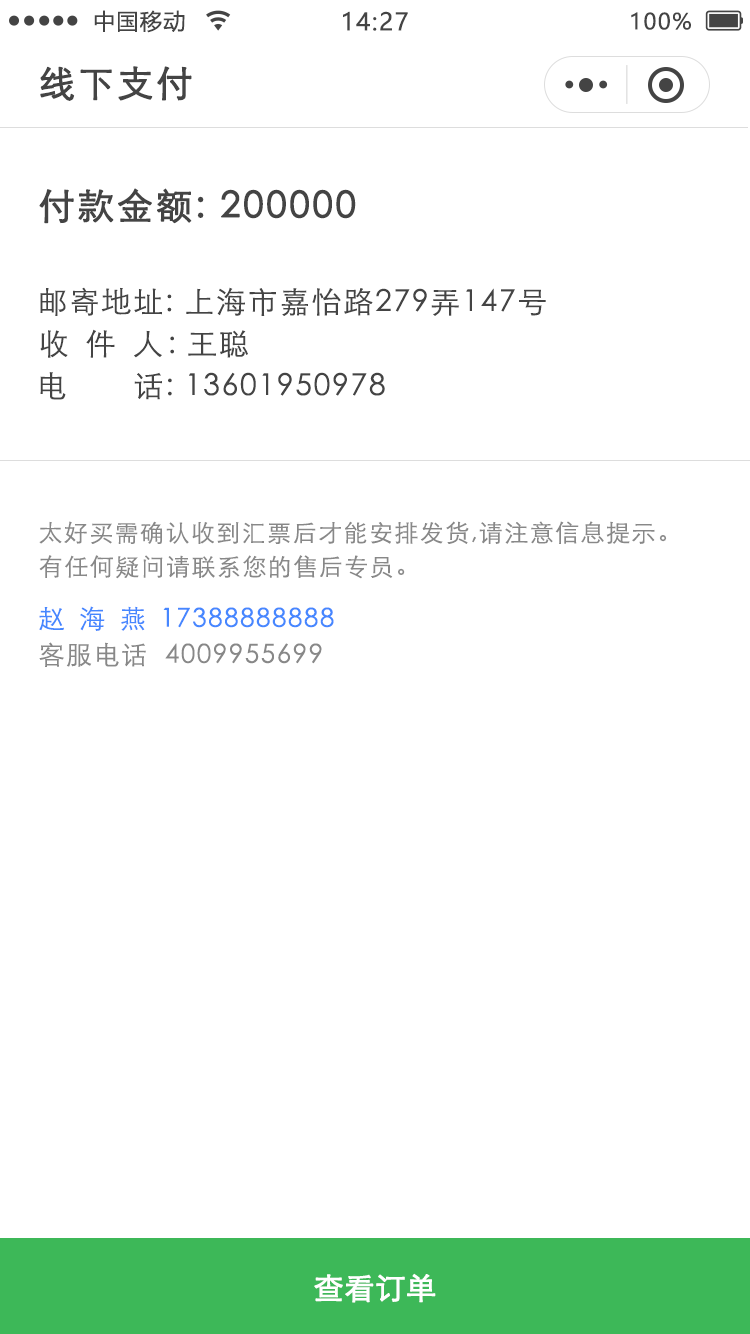
<style>
.page{position:relative;width:750px;height:1334px;background:#ffffff}
.page>*{position:absolute;margin:0}
.t1{font:22px "MicrosoftYaHei";letter-spacing:0.06em;color:#444444}
.t2{font:24px "MicrosoftYaHei";letter-spacing:0.06em;color:#444444}
.t3{font:36px "STXihei";letter-spacing:0.06em;color:#444444;font-weight:bold}
.t4{font:30px "STXihei";letter-spacing:0.06em;color:#444444}
.t5{font:30px "STXihei";letter-spacing:0.16em;color:#444444}
.t6{font:24px "STXihei";letter-spacing:0.06em;color:#888888}
.t7{font:26px "STXihei";letter-spacing:0.06em;color:#4687ff}
.t8{font:26px "STXihei";letter-spacing:0.56em;color:#4687ff}
.t9{font:26px "STXihei";letter-spacing:0.06em;color:#888888}
.t10{font:30px "STXihei";color:#ffffff;font-weight:bold}
</style>
<div class="page">
<p class="t1" style="left:94px;top:10px;width:91px;height:23px">中国移动</p>
<p class="t2" style="left:343px;top:11px;width:65px;height:20px">14:27</p>
<p class="t1" style="left:631px;top:12px;width:60px;height:18px">100%</p>
<p class="t3" style="left:40px;top:66px;width:152px;height:35px">线下支付</p>
<p class="t3" style="left:39px;top:188px;width:317px;height:36px">付款金额: 200000</p>
<p class="t4" style="left:40px;top:287px;width:506px;height:29px">邮寄地址: 上海市嘉怡路279弄147号</p>
<p class="t5" style="left:40px;top:329px;width:208px;height:29px">收 件 人<span class="t4">: 王聪</span></p>
<p class="t4" style="left:40px;top:372px;width:345px;height:28px">电       话: 13601950978</p>
<p class="t6" style="left:39px;top:521px;width:628px;height:23px">太好买需确认收到汇票后才能安排发货,请注意信息提示。</p>
<p class="t6" style="left:39px;top:555px;width:366px;height:24px">有任何疑问请联系您的售后专员。</p>
<p class="t7" style="left:39px;top:606px;width:295px;height:25px"><span class="t8">赵海燕</span>17388888888</p>
<p class="t9" style="left:39px;top:642px;width:283px;height:25px">客服电话  4009955699</p>
<p class="t10" style="left:314px;top:1273px;width:122px;height:30px">查看订单</p>
</div>
